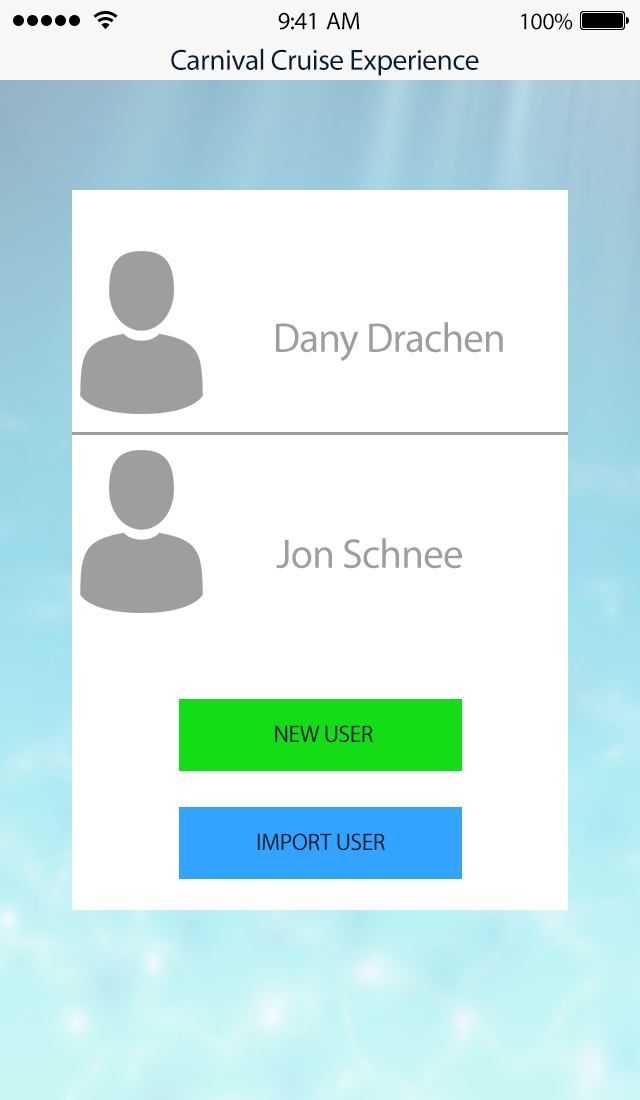
<style>
.page{position:relative;width:640px;height:1100px;background:#ffffff}
.page>*{position:absolute;margin:0}
.t1{font:25px "MyriadPro-Regular";letter-spacing:-0.02em;color:#000000}
.t2{font:24px "MyriadPro-Regular";letter-spacing:-0.02em;color:#000000}
.t3{font:29.4px "MyriadPro-Regular";letter-spacing:-0.02em;color:#061d30}
.t4{font:41.4px "MyriadPro-Regular";letter-spacing:-0.02em;color:#9e9e9e}
.t5{font:24px "MyriadPro-Regular";letter-spacing:-0.02em;color:#061d30}
</style>
<div class="page">
<p class="t1" style="left:278px;top:12px;width:82px;height:18px">9:41 AM</p>
<p class="t2" style="left:521px;top:13px;width:52px;height:17px">100%</p>
<p class="t3" style="left:171px;top:48px;width:308px;height:28px">Carnival Cruise Experience</p>
<p class="t4" style="left:276px;top:322px;width:227px;height:39px">Dany Drachen</p>
<p class="t4" style="left:276px;top:538px;width:186px;height:31px">Jon Schnee</p>
<p class="t5" style="left:275px;top:725px;width:98px;height:18px">NEW USER</p>
<p class="t5" style="left:257px;top:833px;width:128px;height:18px">IMPORT USER</p>
</div>
